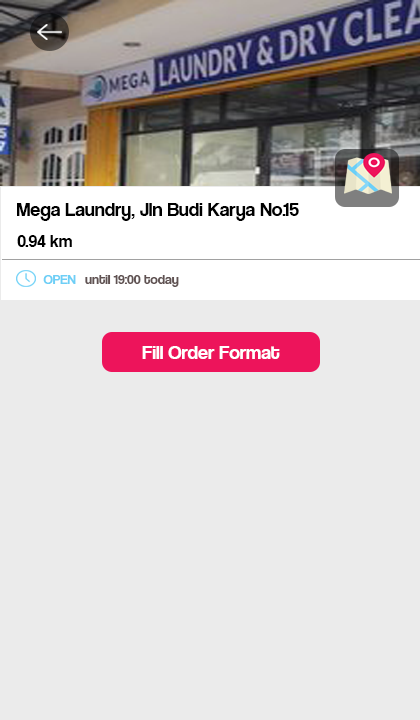
<style>
.page{position:relative;width:420px;height:720px;background:#ebebeb}
.page>*{position:absolute;margin:0}
.t1{font:20px "CoolveticaRg-Regular";color:#000000}
.t2{font:18px "CoolveticaRg-Regular";color:#000000}
.t3{font:14px "CoolveticaRg-Regular";color:#6dcff6}
.t4{font:14px "CoolveticaRg-Regular";color:#605252}
.t5{font:20px "CoolveticaRg-Regular";color:#ffffff}
</style>
<div class="page">
<p class="t1" style="left:17px;top:203px;width:282px;height:18px">Mega Laundry, Jln Budi Karya No.15</p>
<p class="t2" style="left:17px;top:235px;width:55px;height:12px">0.94 km</p>
<p class="t3" style="left:43px;top:275px;width:33px;height:9px">OPEN</p>
<p class="t4" style="left:85px;top:275px;width:94px;height:12px">until 19:00 today</p>
<p class="t5" style="left:142px;top:346px;width:138px;height:13px">Fill Order Format</p>
</div>
